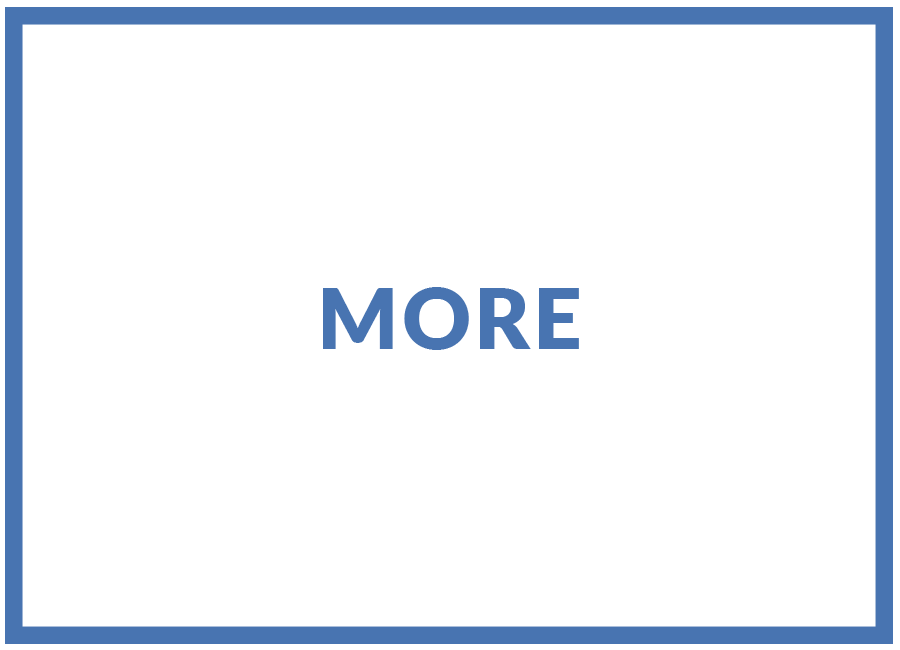
<style>
.page{position:relative;width:900px;height:650px;background:#ffffff}
.page>*{position:absolute;margin:0}
.t1{font:84.2px "Lato-Black";letter-spacing:0.04em;color:#4874b1}
</style>
<div class="page">
<p class="t1" style="left:323px;top:287px;width:256px;height:63px">MORE</p>
</div>
